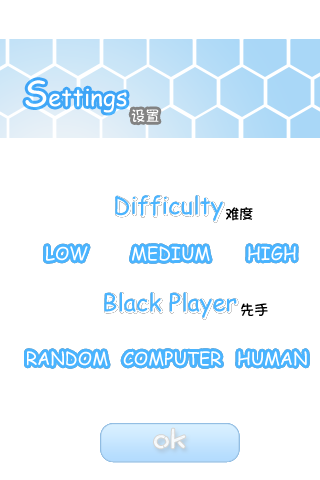
<style>
.page{position:relative;width:320px;height:480px;background:#ffffff}
.page>*{position:absolute;margin:0}
.t1{font:24px "ComicSansMS";color:#ffffff}
.t2{font:36px "ComicSansMS";color:#ffffff}
.t3{font:14px "Lolita-V2";color:#ffffff}
.t4{font:24px "ComicSansMS";color:#4ab4ff}
.t5{font:14px "Lolita-V2";color:#000000}
.t6{font:18px "ComicSansMS";color:#ffffff}
.t7{font:30px "DFCraftYu-W5-WING-RKSJ-H";color:#f7fafc;font-weight:bold}
</style>
<div class="page">
<p class="t1" style="left:25px;top:80px;width:102px;height:33px"><span class="t2">S</span>ettings</p>
<p class="t3" style="left:131px;top:109px;width:28px;height:14px">设置</p>
<p class="t4" style="left:115px;top:195px;width:108px;height:26px">Difficulty</p>
<p class="t5" style="left:226px;top:207px;width:27px;height:14px">难度</p>
<p class="t6" style="left:46px;top:246px;width:42px;height:15px">LOW</p>
<p class="t6" style="left:46px;top:246px;width:42px;height:15px">LOW</p>
<p class="t6" style="left:132px;top:246px;width:78px;height:15px">MEDIUM</p>
<p class="t6" style="left:132px;top:246px;width:78px;height:15px">MEDIUM</p>
<p class="t6" style="left:248px;top:246px;width:48px;height:15px">HIGH</p>
<p class="t6" style="left:248px;top:246px;width:48px;height:15px">HIGH</p>
<p class="t4" style="left:104px;top:292px;width:133px;height:26px">Black Player</p>
<p class="t5" style="left:241px;top:303px;width:27px;height:13px">先手</p>
<p class="t6" style="left:27px;top:351px;width:81px;height:15px">RANDOM</p>
<p class="t6" style="left:27px;top:351px;width:81px;height:15px">RANDOM</p>
<p class="t6" style="left:123px;top:351px;width:98px;height:15px">COMPUTER</p>
<p class="t6" style="left:123px;top:351px;width:98px;height:15px">COMPUTER</p>
<p class="t6" style="left:238px;top:351px;width:69px;height:15px">HUMAN</p>
<p class="t6" style="left:238px;top:351px;width:69px;height:15px">HUMAN</p>
<p class="t7" style="left:154px;top:428px;width:32px;height:21px">ok</p>
<p class="t7" style="left:154px;top:428px;width:32px;height:21px">ok</p>
</div>
